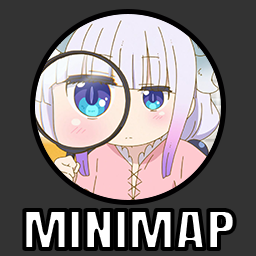
<style>
.page{position:relative;width:256px;height:256px;background:#333333}
.page>*{position:absolute;margin:0}
.t1{font:45.9px "Anton-Regular";scale:1.37 1}
</style>
<div class="page">
<p class="t1" style="left:24px;top:210px;width:211px;height:39px">MINIMAP</p>
</div>
